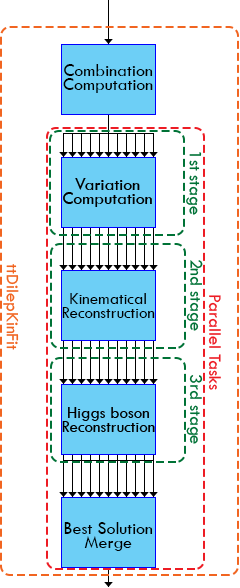
<style>
.page{position:relative;width:240px;height:588px;background:#ffffff}
.page>*{position:absolute;margin:0}
.t1{font:18px/14px "TwCenMT-Regular";color:#000000}
.t2{font:18px "TwCenMT-Regular";color:#007236}
.t3{font:17px/14px "TwCenMT-Regular";color:#000000}
.t4{font:18px "TwCenMT-Regular";color:#ed1c24}
</style>
<div class="page">
<p class="t1" style="left:63px;top:64px;width:90px;height:29px;text-align:center">Combination<br>Computation</p>
<p class="t2" style="left:186px;top:152px;width:16px;height:63px;rotate:90deg">1st stage</p>
<p class="t2" style="left:186px;top:260px;width:17px;height:71px;rotate:90deg">2nd stage</p>
<p class="t3" style="left:62px;top:293px;width:93px;height:25px;text-align:center">Kinematical<br>Reconstruction</p>
<p class="t4" style="left:208px;top:295px;width:13px;height:95px;rotate:90deg">Parallel Tasks</p>
<p class="t2" style="left:186px;top:375px;width:17px;height:69px;rotate:90deg">3rd stage</p>
<p class="t1" style="left:64px;top:522px;width:89px;height:29px;text-align:center">Best Solution<br>Merge</p>
</div>
